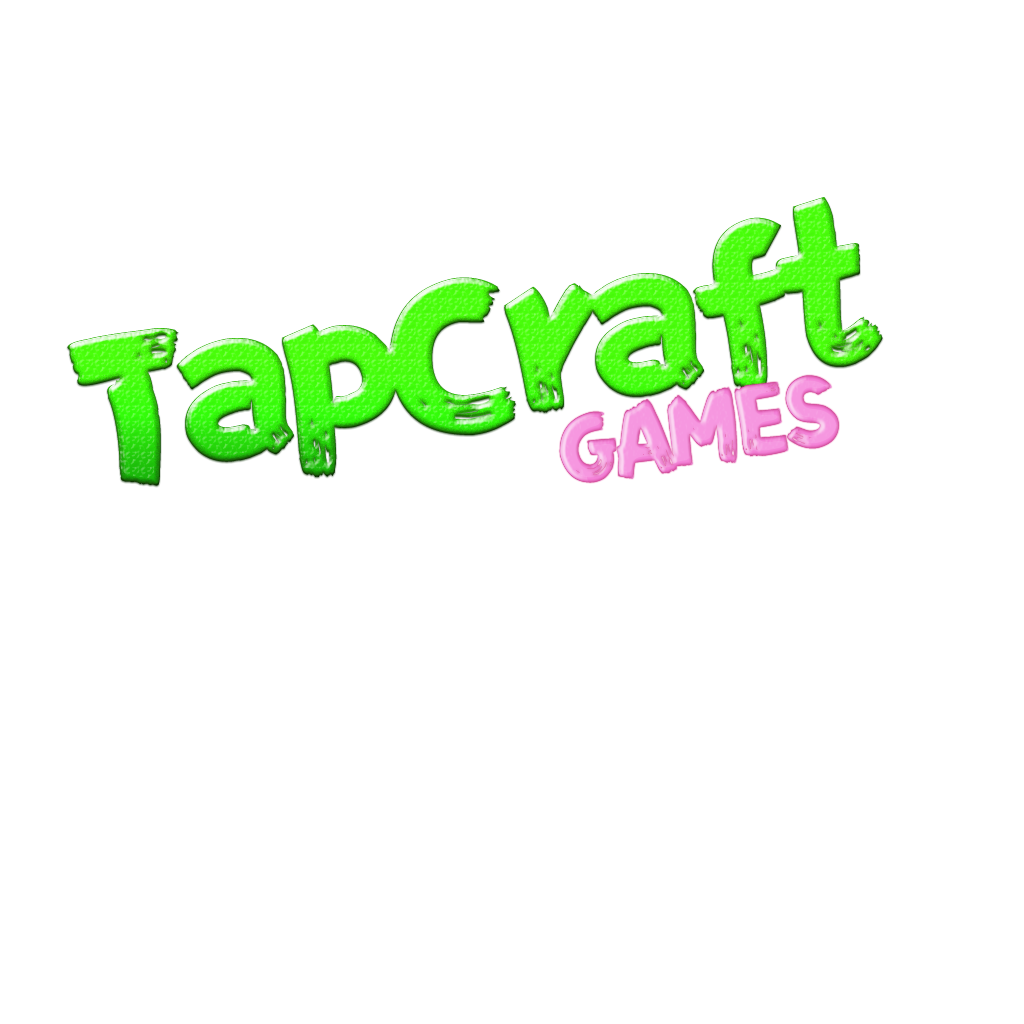
<style>
.page{position:relative;width:1024px;height:1024px;background:#ffffff}
.page>*{position:absolute;margin:0}
.t1{font:194px "FZFENSTXJW--GB1-0";letter-spacing:-0.08em}
.t2{font:90px "FZFENSTXJW--GB1-0";letter-spacing:-0.08em}
</style>
<div class="page">
<p class="t1" style="left:67px;top:197px;width:816px;height:289px;rotate:-9deg">TapCraft</p>
<p class="t2" style="left:559px;top:375px;width:280px;height:108px;rotate:-9deg">GAMES</p>
</div>
